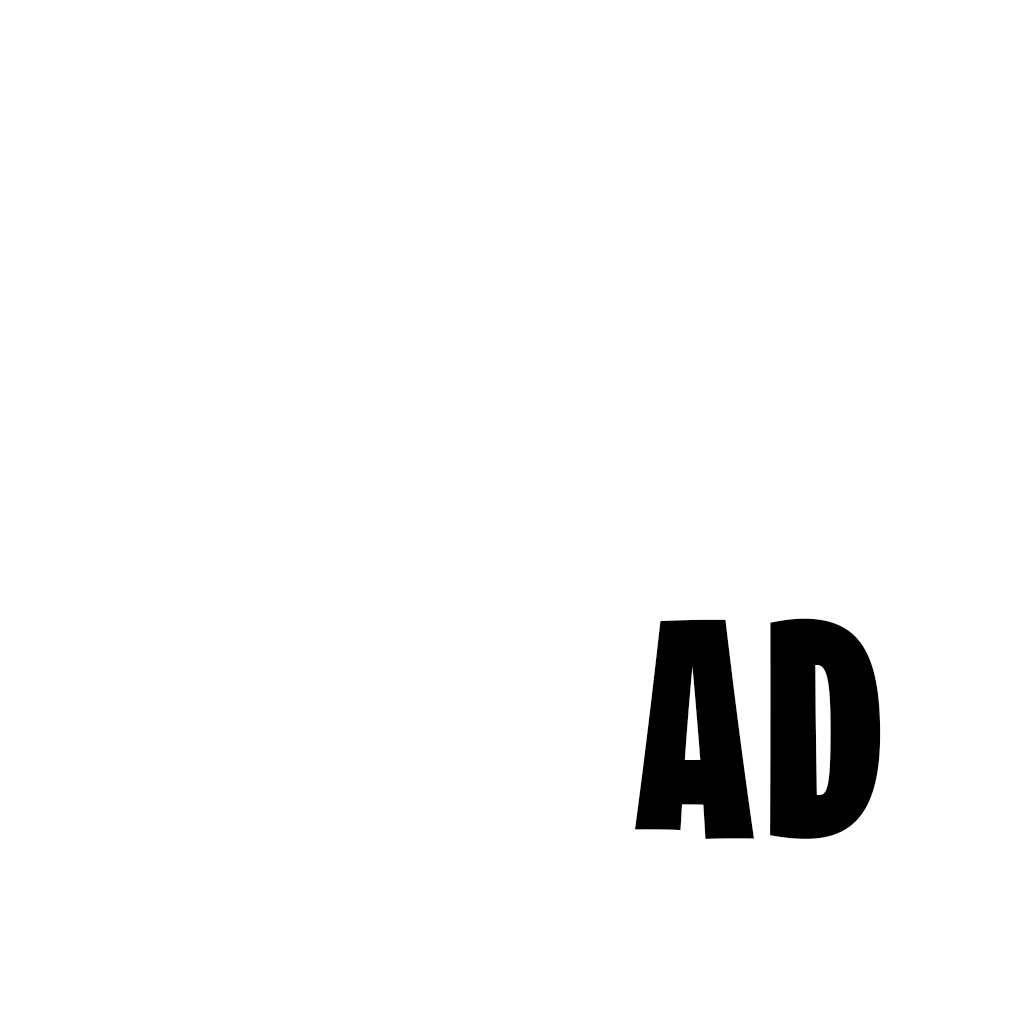
<style>
.page{position:relative;width:1024px;height:1024px;background:#ffffff}
.page>*{position:absolute;margin:0}
.t1{font:305px "BurbankBigCondensed-Black";letter-spacing:0.04em;color:#000000;scale:0.83 1}
</style>
<div class="page">
<p class="t1" style="left:635px;top:618px;width:246px;height:221px">AD</p>
</div>
